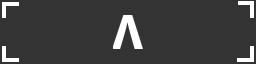
<style>
.page{position:relative;width:256px;height:64px;background:#333333}
.page>*{position:absolute;margin:0}
.t1{font:50px "MyriadPro-Bold";color:#ffffff}
</style>
<div class="page">
<p class="t1" style="left:113px;top:15px;width:30px;height:34px;rotate:180deg">V</p>
</div>
